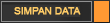
<style>
.page{position:relative;width:110px;height:23px;background:#333333}
.page>*{position:absolute;margin:0}
.t1{font:9.7px "ArialMT";color:#ffcc66;font-weight:bold}
</style>
<div class="page">
<p class="t1" style="left:14px;top:7px;width:67px;height:8px">SIMPAN DATA</p>
</div>
